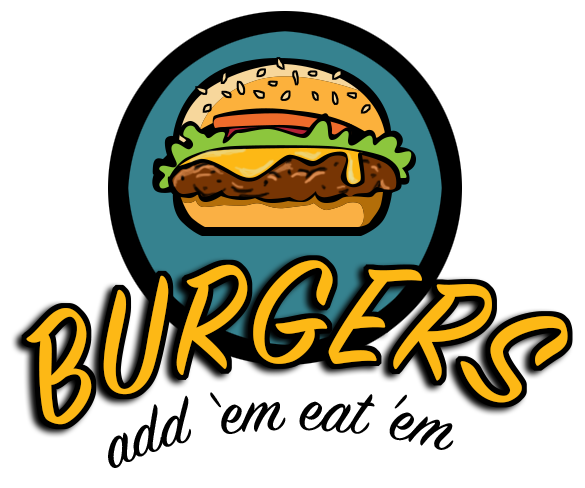
<style>
.page{position:relative;width:585px;height:488px;background:#ffffff}
.page>*{position:absolute;margin:0}
.t1{font:160px "SignPainter-HouseScript";color:#fdb815}
.t2{font:70px "SignPainter-HouseScript";color:#000000}
</style>
<div class="page">
<p class="t1" style="left:26px;top:260px;width:542px;height:165px;rotate:7deg">BURGERS</p>
<p class="t2" style="left:108px;top:392px;width:346px;height:76px;rotate:15deg">add ‘em eat ’em</p>
</div>
